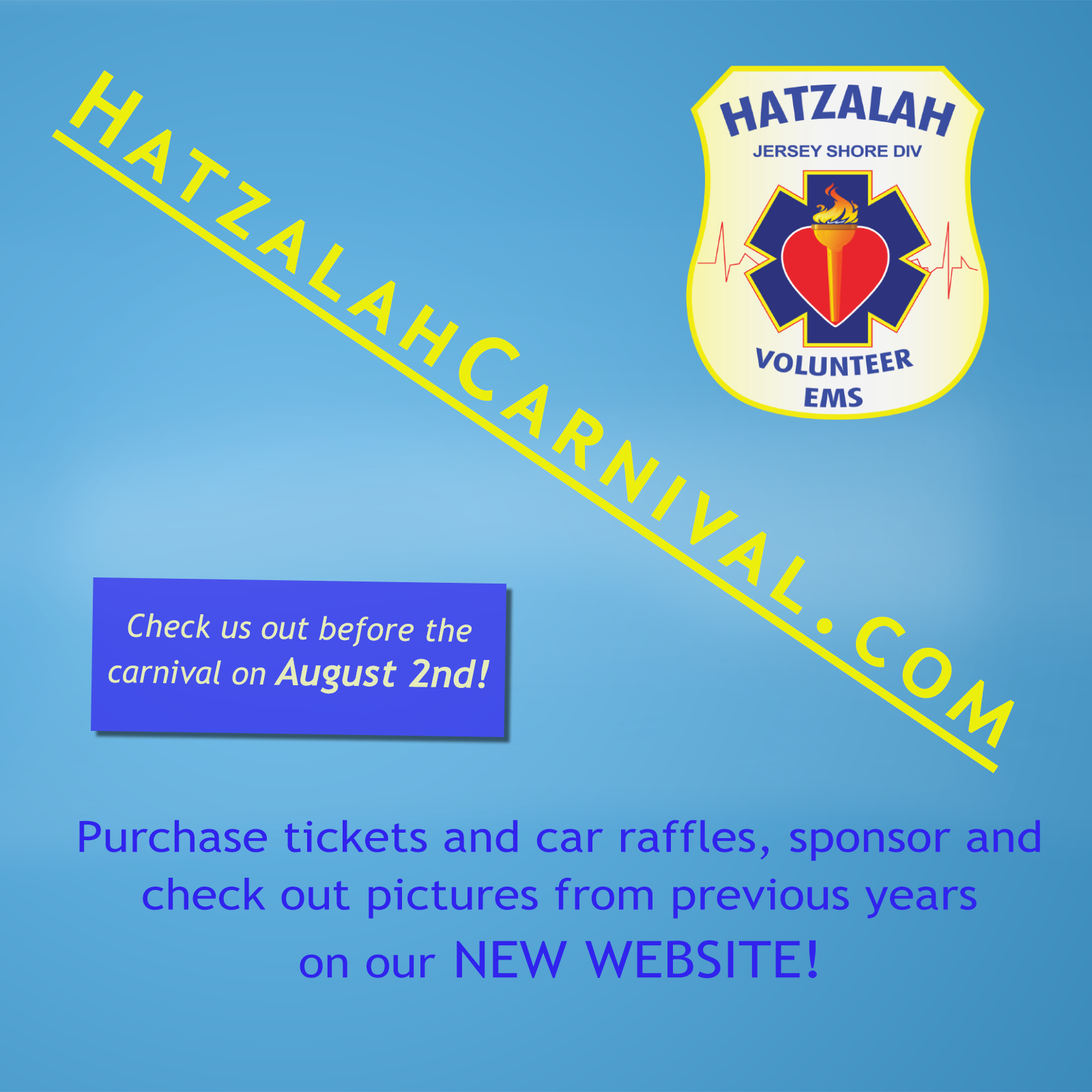
<style>
.page{position:relative;width:1092px;height:1092px}
.page>*{position:absolute;margin:0}
.t1{font:87.2px "TrebuchetMS-Bold";letter-spacing:0.14em;color:#ecef0c;font-variant:small-caps;text-decoration:underline}
.t2{font:31.9px "TrebuchetMS-Italic";color:#e5ecb9}
.t3{font:38.3px "Trebuchet-BoldItalic";color:#e5ecb9}
.t4{font:43.2px "TrebuchetMS";color:#3123ec;scale:1.11 1}
.t5{font:51px "TrebuchetMS";color:#3123ec;scale:1.11 1}
</style>
<div class="page">
<p class="t1" style="left:52px;top:70px;width:963px;height:703px;rotate:34deg">HatzalahCarnival.com</p>
<p class="t2" style="left:109px;top:613px;width:381px;height:81px;text-align:center;rotate:1deg">Check us out before the <br>carnival on <span class="t3">August 2nd!</span></p>
<p class="t4" style="left:79px;top:820px;width:961px;height:159px;text-align:center">Purchase tickets and car raffles, sponsor and <br>check out pictures from previous years <br>on our<span class="t5"> NEW WEBSITE!</span></p>
</div>
